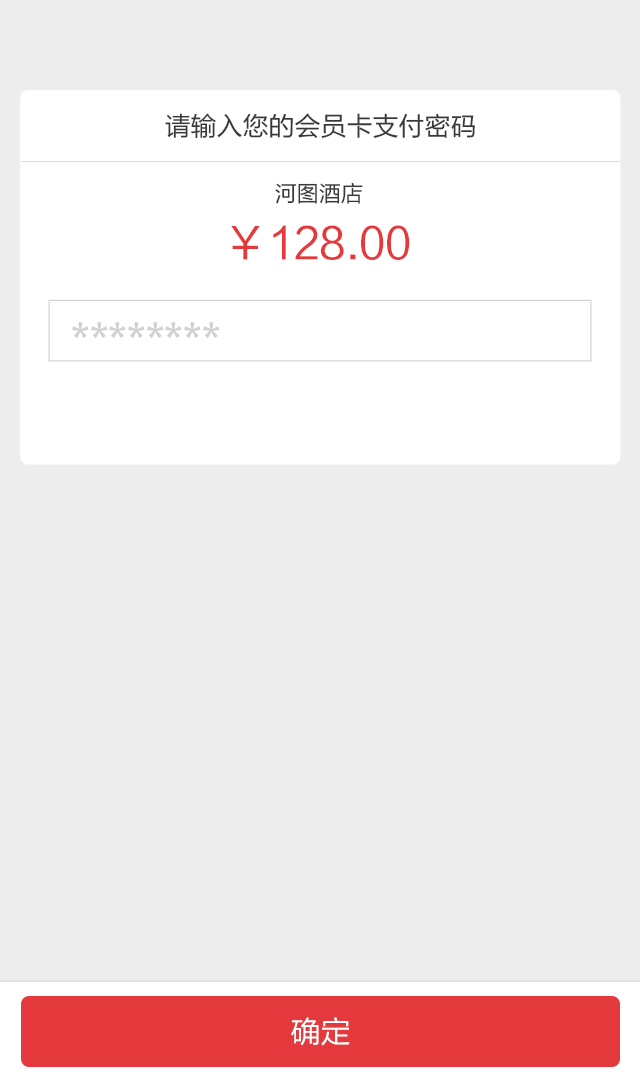
<style>
.page{position:relative;width:640px;height:1080px;background:#ededed}
.page>*{position:absolute;margin:0}
.t1{font:26px "FZLTHJW--GB1-0";color:#393939}
.t2{font:22px "FZLTHJW--GB1-0";color:#393939}
.t3{font:43px "FZLTHJW--GB1-0";color:#e43a3d}
.t4{font:42.7px "FZLTHJW--GB1-0";color:#d1d0d0}
.t5{font:30px "FZLTHJW--GB1-0";color:#ffffff}
</style>
<div class="page">
<p class="t1" style="left:165px;top:113px;width:310px;height:26px">请输入您的会员卡支付密码</p>
<p class="t2" style="left:275px;top:182px;width:88px;height:22px">河图酒店</p>
<p class="t3" style="left:231px;top:225px;width:179px;height:35px">￥128.00</p>
<p class="t4" style="left:72px;top:322px;width:148px;height:16px">********</p>
<p class="t5" style="left:291px;top:1017px;width:59px;height:29px">确定</p>
</div>
